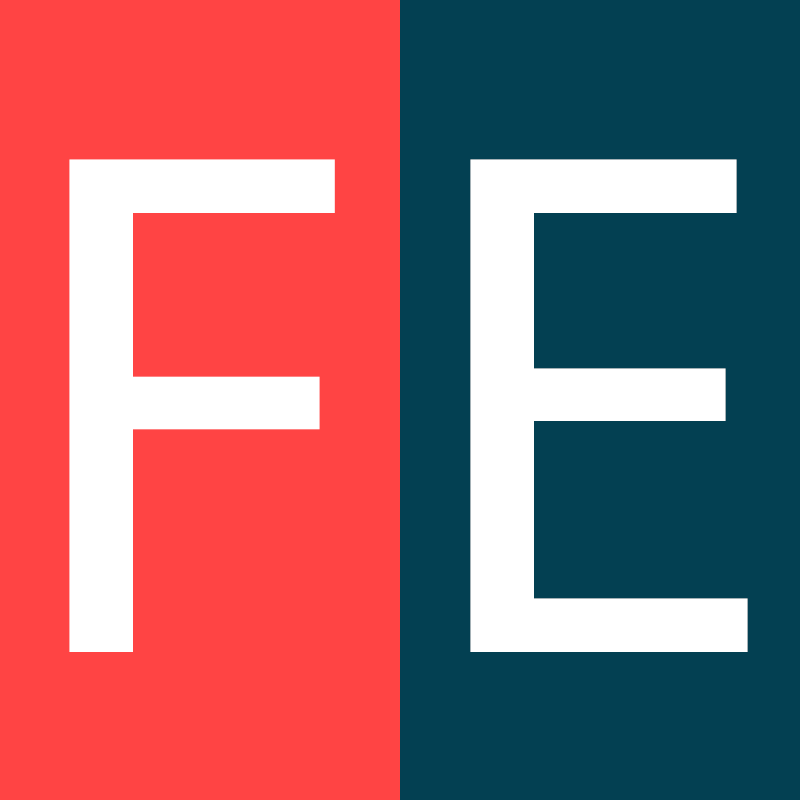
<style>
.page{position:relative;width:800px;height:800px;background:#ff4444}
.page>*{position:absolute;margin:0}
.t1{font:730.6px "MyriadPro-Regular";letter-spacing:0.33em;color:#ffffff}
</style>
<div class="page">
<p class="t1" style="left:69px;top:159px;width:266px;height:493px">F</p>
<p class="t1" style="left:470px;top:159px;width:278px;height:493px">E</p>
</div>
